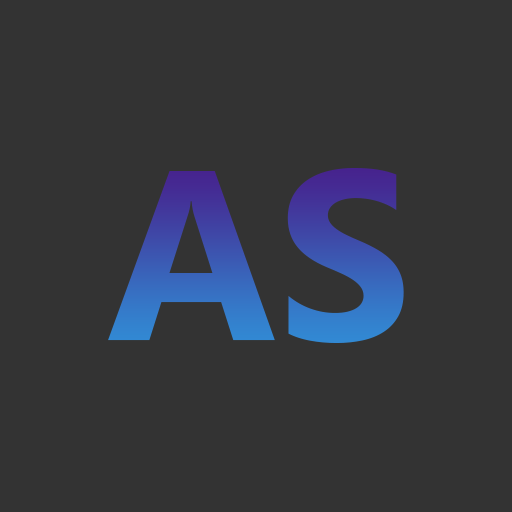
<style>
.page{position:relative;width:512px;height:512px;background:#333333}
.page>*{position:absolute;margin:0}
.t1{font:241.4px "SegoeUI-Bold"}
</style>
<div class="page">
<p class="t1" style="left:108px;top:168px;width:296px;height:175px">AS</p>
</div>
